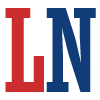
<style>
.page{position:relative;width:100px;height:100px;background:#ffffff}
.page>*{position:absolute;margin:0}
.t1{font:114.2px "Rockwell-Condensed";letter-spacing:-0.01em;color:#cb2c2d}
.t2{font:114.2px "Rockwell-Condensed";letter-spacing:-0.01em;color:#113c77}
</style>
<div class="page">
<p class="t1" style="left:5px;top:8px;width:91px;height:84px">L<span class="t2">N</span></p>
</div>
